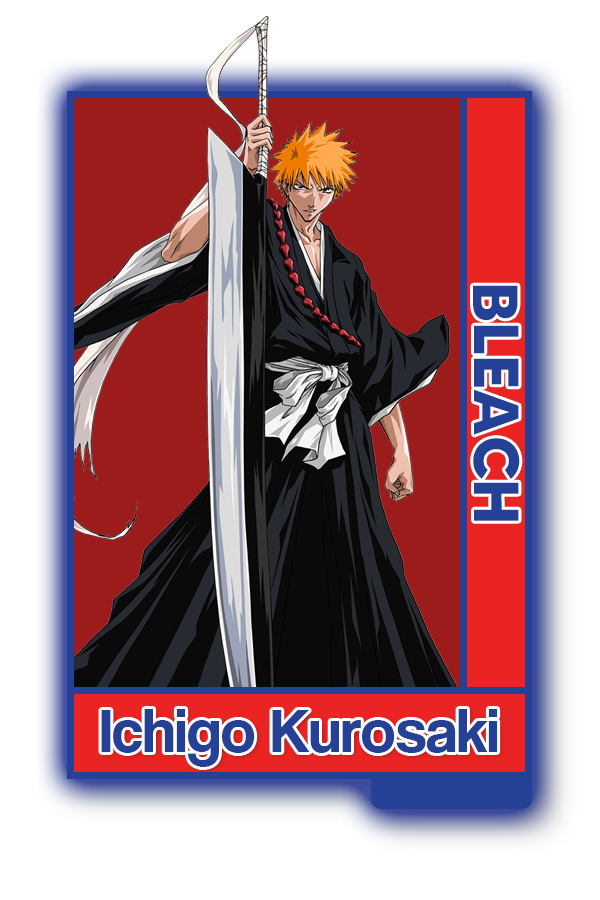
<style>
.page{position:relative;width:600px;height:900px;background:#ffffff}
.page>*{position:absolute;margin:0}
.t1{font:63.6px "MADETOMMY-Bold";color:#254195}
.t2{font:63.6px "CoolveticaRg-Regular";color:#254195}
</style>
<div class="page">
<p class="t1" style="left:473px;top:285px;width:47px;height:236px;rotate:90deg">BLEACH</p>
<p class="t2" style="left:101px;top:709px;width:397px;height:58px">Ichigo Kurosaki</p>
</div>
